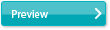
<style>
.page{position:relative;width:110px;height:30px;background:#4dc2cb}
.page>*{position:absolute;margin:0}
.t1{font:11px "MyriadPro-Regular";color:#ffffff}
</style>
<div class="page">
<p class="t1" style="left:12px;top:10px;width:36px;height:8px">Preview</p>
</div>
